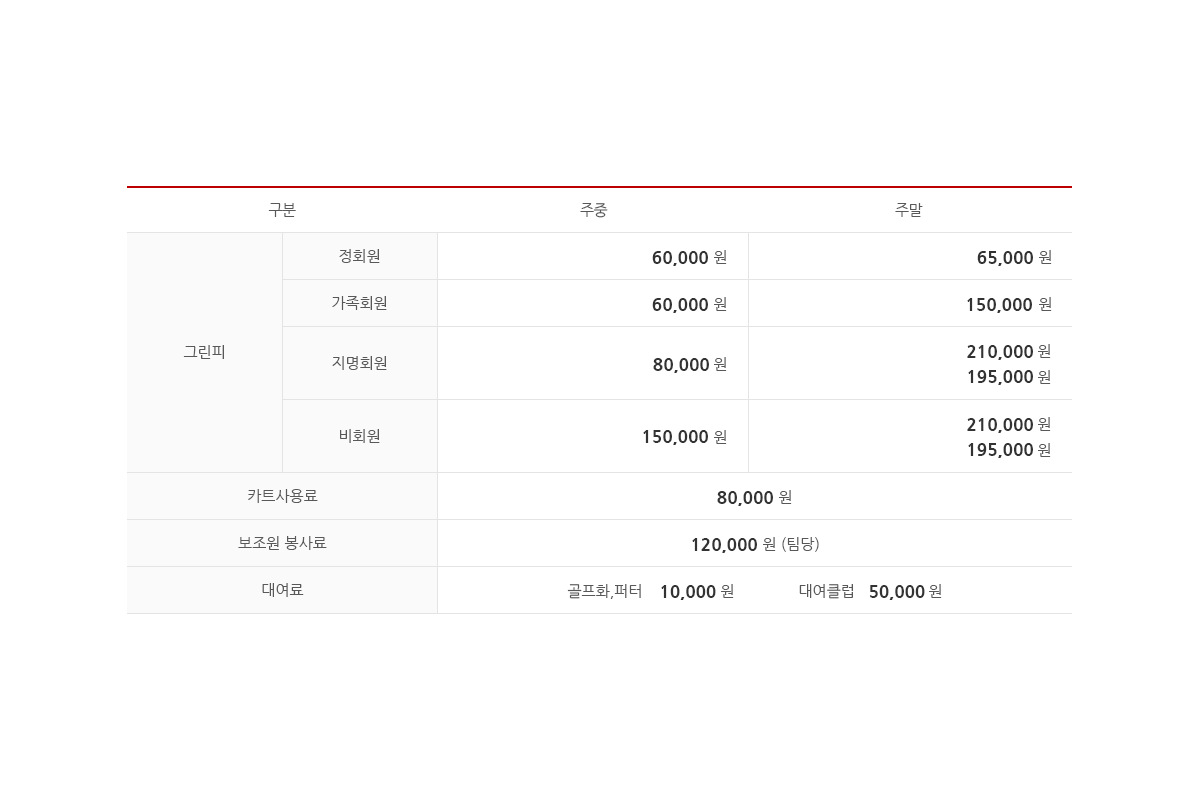
<style>
.page{position:relative;width:1200px;height:800px;background:#ffffff}
.page>*{position:absolute;margin:0}
.t1{font:15px "NanumGothic";letter-spacing:-0.04em;color:#585858}
.t2{font:15px "NanumGothic";color:#585858}
.t3{font:17px "NanumGothicExtraBold";color:#333333}
.t4{font:17px/25px "NanumGothicExtraBold";color:#333333}
.t5{font:15px/26px "NanumGothic";color:#585858}
.t6{font:15px/47px "NanumGothic";color:#585858}
</style>
<div class="page">
<p class="t1" style="left:268px;top:203px;width:655px;height:15px">구분                                                                               주중                                                                                주말</p>
<p class="t2" style="left:339px;top:249px;width:41px;height:14px">정회원</p>
<p class="t3" style="left:652px;top:251px;width:56px;height:15px">60,000</p>
<p class="t2" style="left:714px;top:250px;width:13px;height:14px">원</p>
<p class="t3" style="left:977px;top:251px;width:56px;height:15px">65,000</p>
<p class="t2" style="left:1039px;top:250px;width:13px;height:14px">원</p>
<p class="t2" style="left:332px;top:296px;width:55px;height:14px">가족회원</p>
<p class="t3" style="left:652px;top:298px;width:56px;height:15px">60,000</p>
<p class="t2" style="left:714px;top:297px;width:13px;height:14px">원</p>
<p class="t3" style="left:967px;top:298px;width:65px;height:15px">150,000</p>
<p class="t2" style="left:1039px;top:297px;width:13px;height:14px">원</p>
<p class="t2" style="left:183px;top:345px;width:41px;height:14px">그린피</p>
<p class="t4" style="left:967px;top:345px;width:66px;height:40px;text-align:right">210,000<br>195,000</p>
<p class="t5" style="left:1038px;top:344px;width:13px;height:40px">원<br>원</p>
<p class="t2" style="left:332px;top:356px;width:55px;height:14px">지명회원</p>
<p class="t3" style="left:653px;top:358px;width:56px;height:15px">80,000</p>
<p class="t2" style="left:714px;top:357px;width:13px;height:14px">원</p>
<p class="t4" style="left:967px;top:418px;width:66px;height:40px;text-align:right">210,000<br>195,000</p>
<p class="t5" style="left:1038px;top:417px;width:13px;height:40px">원<br>원</p>
<p class="t2" style="left:340px;top:429px;width:40px;height:14px">비회원</p>
<p class="t3" style="left:643px;top:430px;width:65px;height:15px">150,000</p>
<p class="t2" style="left:714px;top:430px;width:13px;height:14px">원</p>
<p class="t6" style="left:238px;top:489px;width:89px;height:108px;text-align:center">카트사용료<br>보조원 봉사료<br>대여료</p>
<p class="t3" style="left:717px;top:491px;width:56px;height:15px">80,000</p>
<p class="t2" style="left:779px;top:490px;width:13px;height:14px">원</p>
<p class="t3" style="left:692px;top:538px;width:65px;height:15px">120,000</p>
<p class="t2" style="left:763px;top:537px;width:56px;height:15px">원 (팀당)</p>
<p class="t2" style="left:567px;top:584px;width:74px;height:15px">골프화,퍼터</p>
<p class="t3" style="left:661px;top:585px;width:264px;height:15px">10,000                                50,000</p>
<p class="t2" style="left:721px;top:584px;width:13px;height:14px">원</p>
<p class="t2" style="left:799px;top:584px;width:54px;height:15px">대여클럽</p>
<p class="t2" style="left:929px;top:584px;width:13px;height:14px">원</p>
</div>
